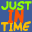
<style>
.page{position:relative;width:32px;height:32px;background:#3e5c9a}
.page>*{position:absolute;margin:0}
.t1{font:14.9px "DFWimped";color:#95fc02;scale:0.76 1}
.t2{font:23.4px "DFWimped";color:#fc5402;scale:0.76 1}
.t3{font:16px "DFWimped";color:#fcbe02;scale:0.76 1}
</style>
<div class="page">
<p class="t1" style="left:1px;top:1px;width:31px;height:10px">Just</p>
<p class="t2" style="left:7px;top:8px;width:17px;height:15px">in</p>
<p class="t3" style="left:1px;top:21px;width:30px;height:11px">Time</p>
</div>
